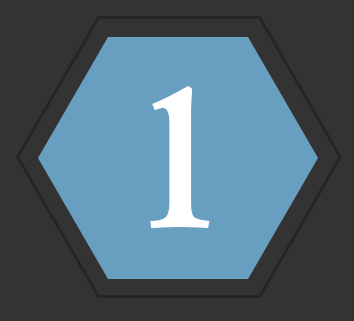
<style>
.page{position:relative;width:354px;height:321px;background:#333333}
.page>*{position:absolute;margin:0}
.t1{font:280px "Rod";color:#ffffff}
</style>
<div class="page">
<p class="t1" style="left:150px;top:85px;width:60px;height:143px">1</p>
</div>
